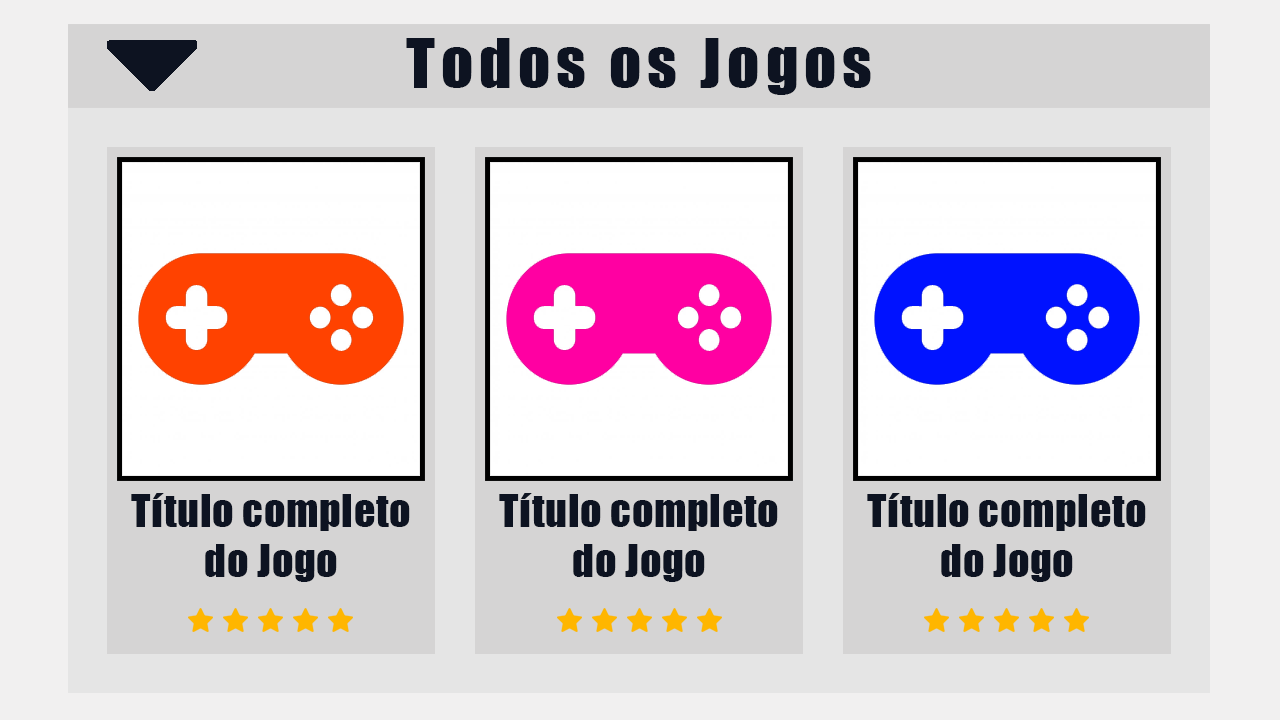
<style>
.page{position:relative;width:1280px;height:720px;background:#d5d4d4}
.page>*{position:absolute;margin:0}
.t1{font:62.5px "Impact";letter-spacing:0.1em;color:#0d1321}
.t2{font:41.7px "Impact";letter-spacing:0.02em;color:#0d1321}
</style>
<div class="page">
<p class="t1" style="left:406px;top:38px;width:465px;height:57px">Todos os Jogos</p>
<p class="t2" style="left:131px;top:493px;width:279px;height:89px;text-align:center">Título completo do Jogo</p>
<p class="t2" style="left:499px;top:493px;width:279px;height:89px;text-align:center">Título completo do Jogo</p>
<p class="t2" style="left:867px;top:493px;width:279px;height:89px;text-align:center">Título completo do Jogo</p>
</div>
